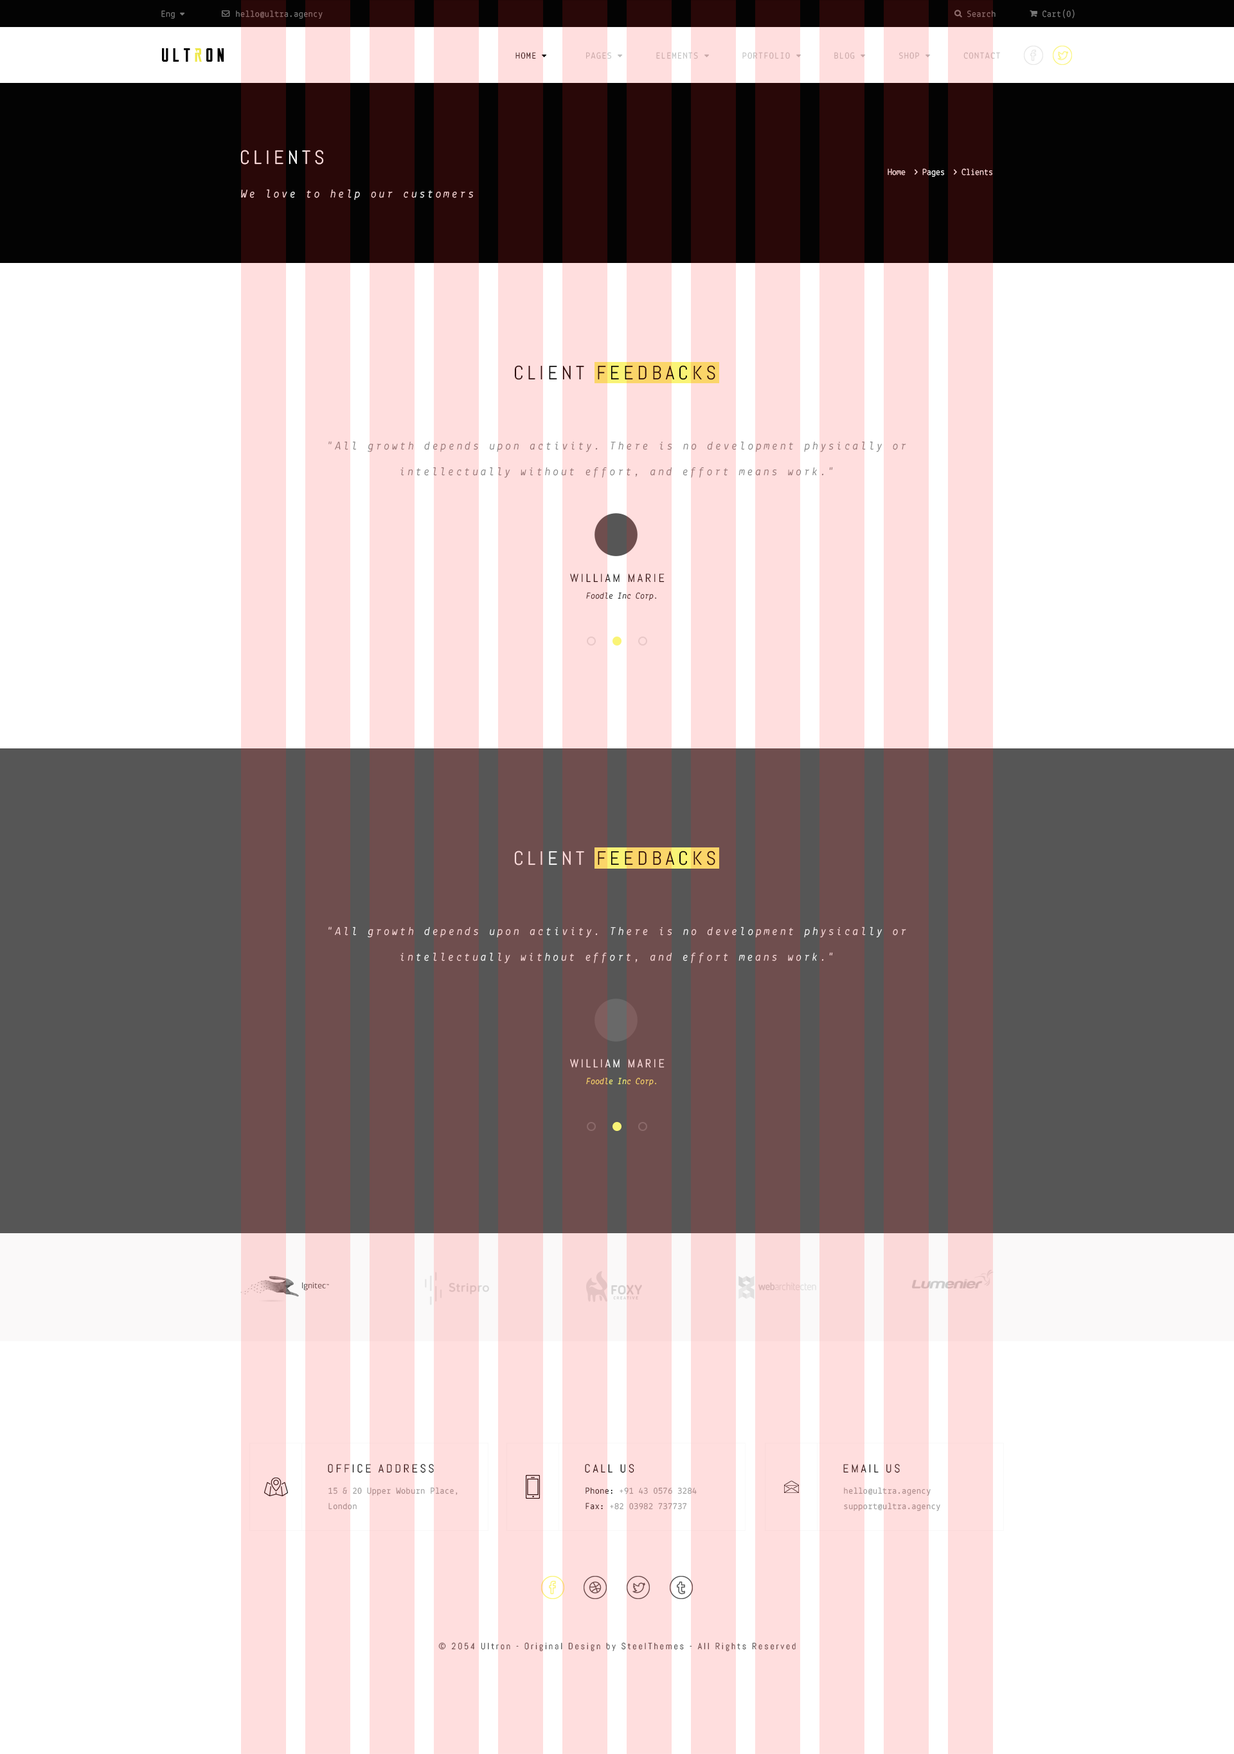
<style>
.page{position:relative;width:1234px;height:1754px;background:#ffffff}
.page>*{position:absolute;margin:0}
.t1{font:9px "Lekton-Regular";letter-spacing:0.04em;color:#787878}
.t2{font:9px "Lekton-Regular";letter-spacing:0.1em;color:#bfbfbf;text-transform:uppercase}
.t3{font:9px "Lekton-Regular";letter-spacing:0.1em;color:#030303;text-transform:uppercase}
.t4{font:19.3px "Abel-Regular";letter-spacing:0.2em;color:#ffdede;text-transform:uppercase}
.t5{font:11.6px "Lekton-Italic";letter-spacing:0.2em;color:#ffdede}
.t6{font:19.3px "Abel-Regular";letter-spacing:0.2em;color:#290808;text-transform:uppercase}
.t7{font:11.6px/25.7px "Lekton-Italic";letter-spacing:0.2em;color:#8c6b6b}
.t8{font:9px/16.7px "Lekton-Italic";color:#2f0e0e}
.t9{font:11.6px/45px "Abel-Regular";letter-spacing:0.2em;color:#2f0e0e;text-transform:uppercase}
.t10{font:11.6px/25.7px "Lekton-Italic";letter-spacing:0.2em;color:#ffdede}
.t11{font:9px/16.7px "Lekton-Italic";color:#ffdede}
.t12{font:11.6px/45px "Abel-Regular";letter-spacing:0.2em;color:#ffdede;text-transform:uppercase}
.t13{font:11.6px "Abel-Regular";letter-spacing:0.2em;text-transform:uppercase}
.t14{font:9px/15.4px "Lekton-Regular";letter-spacing:0.04em;color:#969595}
.t15{font:9px/15.4px "Lekton-Regular";letter-spacing:0.04em;color:#030303}
.t16{font:9px "Abel-Regular";letter-spacing:0.2em;color:#694848}
</style>
<div class="page">
<p class="t1" style="left:161px;top:10px;width:14px;height:9px">Eng</p>
<p class="t1" style="left:236px;top:10px;width:87px;height:9px">hello@ultra.agency</p>
<p class="t1" style="left:968px;top:10px;width:28px;height:7px">Search</p>
<p class="t1" style="left:1043px;top:9px;width:32px;height:10px">Cart(0)</p>
<p class="t2" style="left:516px;top:52px;width:484px;height:7px"><span class="t3">Home         </span>Pages        Elements        Portfolio        Blog        Shop        Contact</p>
<p class="t4" style="left:240px;top:150px;width:84px;height:15px">clients</p>
<p class="t5" style="left:241px;top:189px;width:232px;height:11px">We love to help our customers</p>
<p class="t6" style="left:514px;top:365px;width:202px;height:15px">Client feedbacks</p>
<p class="t7" style="left:328px;top:441px;width:578px;height:37px;text-align:center">"All growth depends upon activity. There is no development physically or<br>intellectually without effort, and effort means work."</p>
<p class="t8" style="left:570px;top:573px;width:95px;height:27px;text-align:center"><span class="t9">William marie  <br></span>Foodle Inc Corp.</p>
<p class="t10" style="left:328px;top:926px;width:578px;height:37px;text-align:center">"All growth depends upon activity. There is no development physically or<br>intellectually without effort, and effort means work."</p>
<p class="t11" style="left:570px;top:1059px;width:95px;height:27px;text-align:center"><span class="t12">William marie  <br></span>Foodle Inc Corp.</p>
<p class="t13" style="left:328px;top:1464px;width:106px;height:9px">Office Address</p>
<p class="t13" style="left:585px;top:1464px;width:49px;height:9px">Call us</p>
<p class="t13" style="left:843px;top:1464px;width:57px;height:9px">Email us</p>
<p class="t14" style="left:328px;top:1487px;width:130px;height:22px">15 &amp; 20 Upper Woburn Place,<br>London</p>
<p class="t14" style="left:586px;top:1487px;width:111px;height:22px"><span class="t15">Phone:</span> +91 43 0576 3284<br><span class="t15">Fax:</span> +82 03982 737737</p>
<p class="t14" style="left:844px;top:1487px;width:97px;height:24px">hello@ultra.agency<br>support@ultra.agency</p>
<p class="t16" style="left:438px;top:1642px;width:358px;height:9px">© 2054 Ultron - Original Design by SteelThemes - All Rights Reserved</p>
</div>
